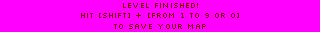
<style>
.page{position:relative;width:320px;height:32px;background:#ff00ff}
.page>*{position:absolute;margin:0}
.t1{font:9px "Silkscreen";color:#770000}
</style>
<div class="page">
<p class="t1" style="left:81px;top:3px;width:158px;height:26px;text-align:center">LEVEL FINISHED!<br>HIT [SHIFT] + [from 1 to 9 or 0]<br>TO SAVE YOUR MAP</p>
</div>
